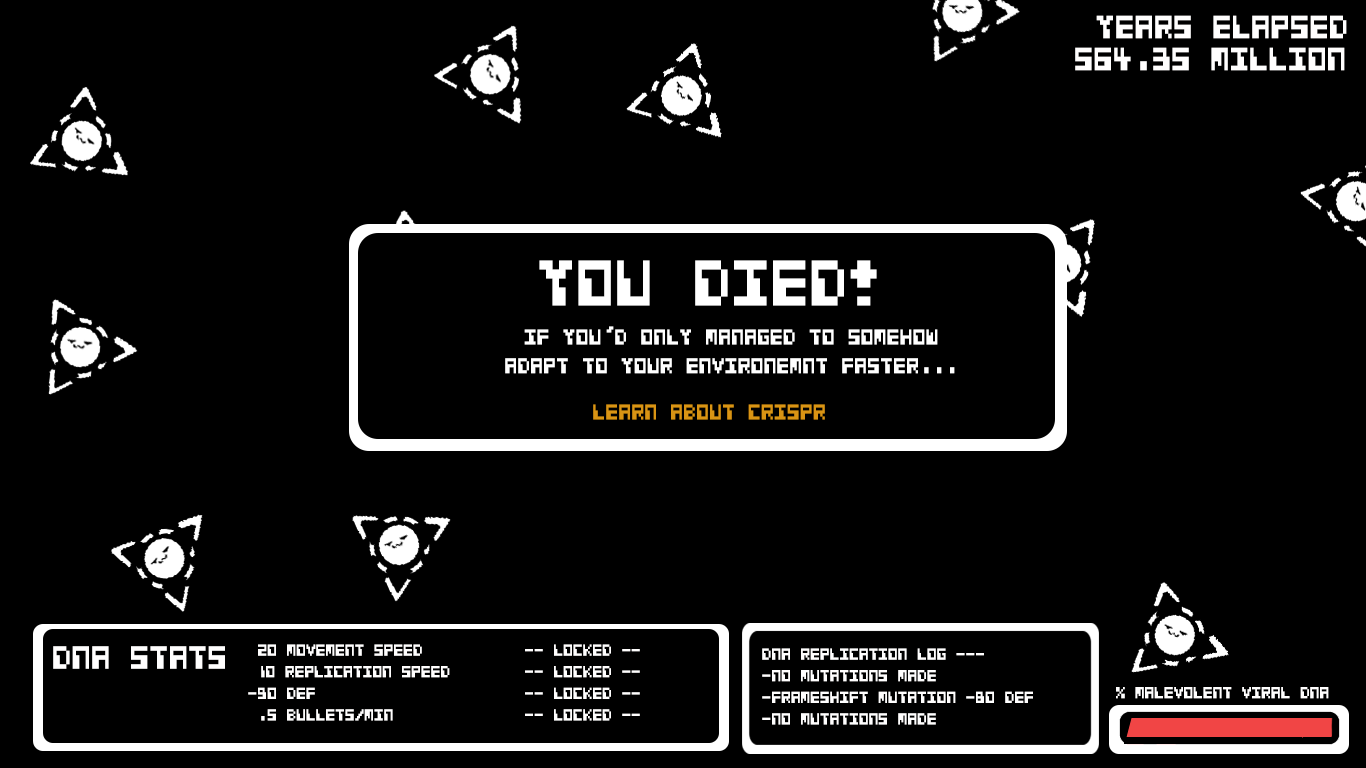
<style>
.page{position:relative;width:1366px;height:768px;background:#000000}
.page>*{position:absolute;margin:0}
.t1{font:36px "CosmicAlien";color:#fffefe;scale:0.72 1}
.t2{font:72px "CosmicAlien";color:#ffffff;scale:0.72 1}
.t3{font:24px "CosmicAlien";color:#ffffff;scale:0.72 1}
.t4{font:24px "CosmicAlien";color:#d99414;scale:0.72 1}
.t5{font:18px "CosmicAlien";color:#fffefe;scale:0.72 1}
</style>
<div class="page">
<p class="t1" style="left:1096px;top:15px;width:251px;height:24px">Years Elapsed</p>
<p class="t1" style="left:1075px;top:47px;width:270px;height:24px">564.35 million</p>
<p class="t2" style="left:539px;top:260px;width:338px;height:46px">You died!</p>
<p class="t3" style="left:505px;top:326px;width:450px;height:48px;text-align:center">If you'd only managed to somehow<br>adapt to your environemnt faster...</p>
<p class="t4" style="left:593px;top:404px;width:232px;height:16px">LEARN ABOUT CRISPR</p>
<p class="t1" style="left:53px;top:646px;width:172px;height:23px">DNA stats</p>
<p class="t5" style="left:248px;top:644px;width:202px;height:77px">20 movement speed<br> 10 replication speed<br>-90 def<br> .5 bullets/min</p>
<p class="t5" style="left:525px;top:644px;width:115px;height:77px">-- LOCKED --<br> -- LOCKED --<br> -- LOCKED --<br> -- LOCKED --</p>
<p class="t5" style="left:762px;top:648px;width:271px;height:77px">DNA replication log --- <br>-no mutations made<br>-Frameshift mutation -80 def<br>-no mutations made<br>-</p>
<p class="t5" style="left:1116px;top:687px;width:213px;height:12px">% malevolent viral DNA</p>
</div>
